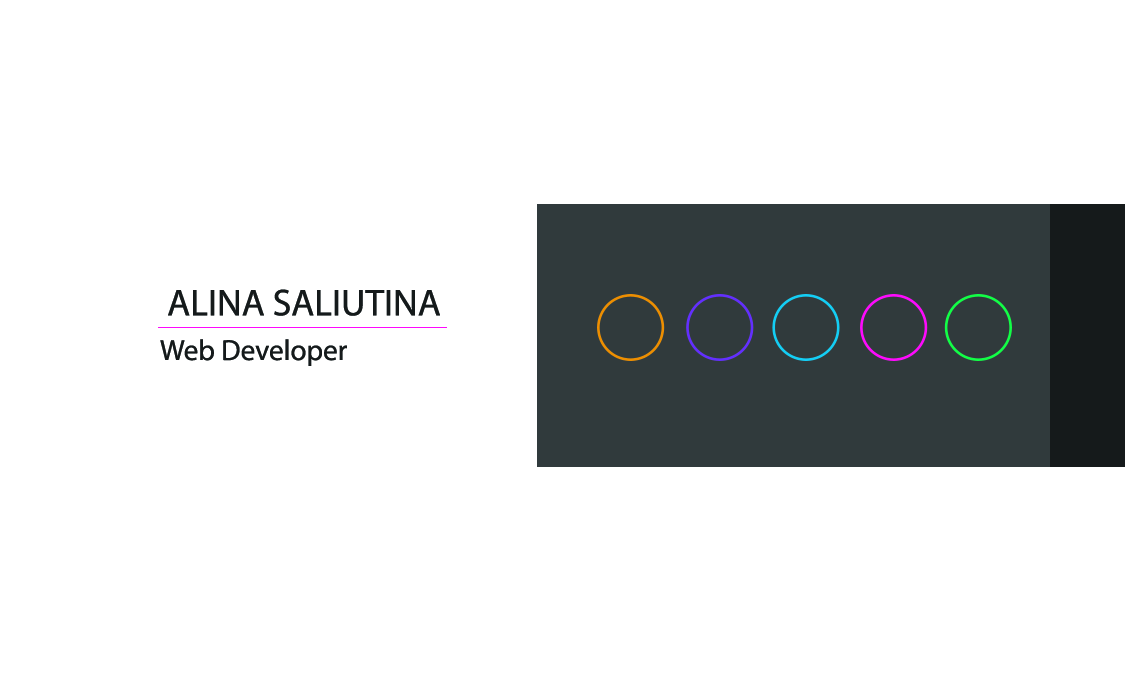
<style>
.page{position:relative;width:1125px;height:675px;background:#ffffff}
.page>*{position:absolute;margin:0}
.t1{font:37.5px "MyriadPro-Regular";color:#15191a;text-transform:uppercase}
.t2{font:29.2px "MyriadPro-Regular";color:#15191a}
</style>
<div class="page">
<p class="t1" style="left:168px;top:289px;width:272px;height:27px">ALINA SALIUTINA</p>
<p class="t2" style="left:160px;top:339px;width:187px;height:27px">Web Developer</p>
</div>
